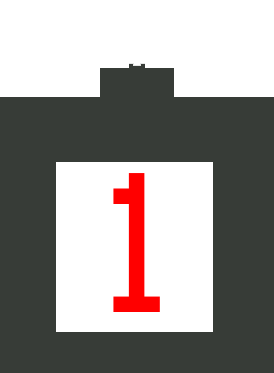
<style>
.page{position:relative;width:274px;height:373px;background:#373c37}
.page>*{position:absolute;margin:0}
.t1{font:246.9px "rainyhearts";color:#ff0000}
</style>
<div class="page">
<p class="t1" style="left:113px;top:173px;width:47px;height:139px">1</p>
</div>
